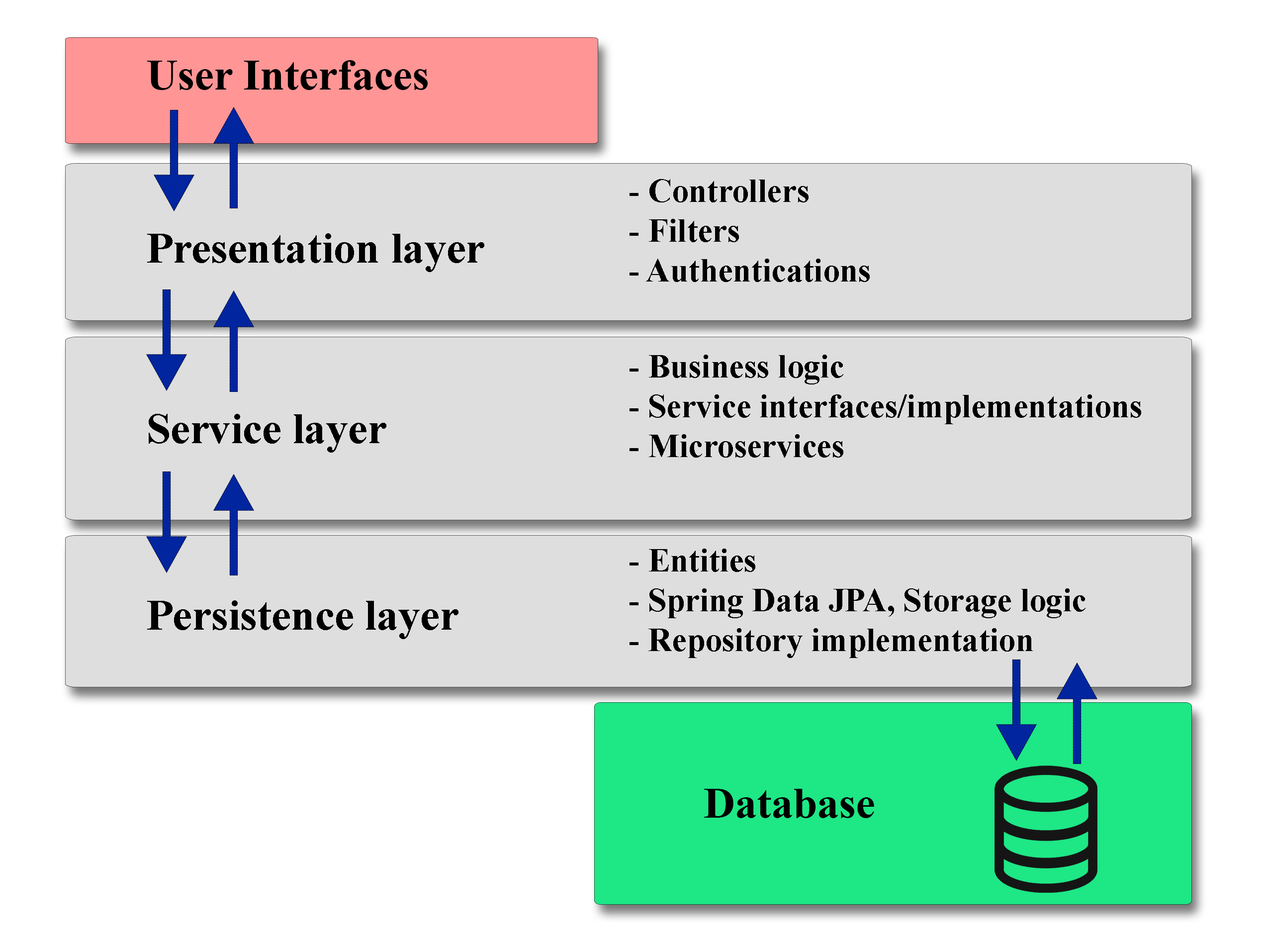
<style>
.page{position:relative;width:1268px;height:941px;background:#dedede}
.page>*{position:absolute;margin:0}
.t1{font:43.5px "TimesNewRomanPS-BoldMT";color:#000000}
.t2{font:33.1px "TimesNewRomanPS-BoldMT";color:#000000}
</style>
<div class="page">
<p class="t1" style="left:147px;top:60px;width:281px;height:30px">User Interfaces</p>
<p class="t2" style="left:629px;top:179px;width:241px;height:103px">- Controllers<br>- Filters<br>- Authentications</p>
<p class="t1" style="left:147px;top:233px;width:337px;height:39px">Presentation layer</p>
<p class="t2" style="left:629px;top:354px;width:512px;height:103px">- Business logic<br>- Service interfaces/implementations<br>- Microservices</p>
<p class="t1" style="left:149px;top:414px;width:237px;height:38px">Service layer</p>
<p class="t2" style="left:629px;top:548px;width:456px;height:110px">- Entities<br>- Spring Data JPA, Storage logic<br>- Repository implementation</p>
<p class="t1" style="left:147px;top:600px;width:311px;height:39px">Persistence layer</p>
<p class="t1" style="left:704px;top:788px;width:170px;height:30px">Database</p>
</div>
